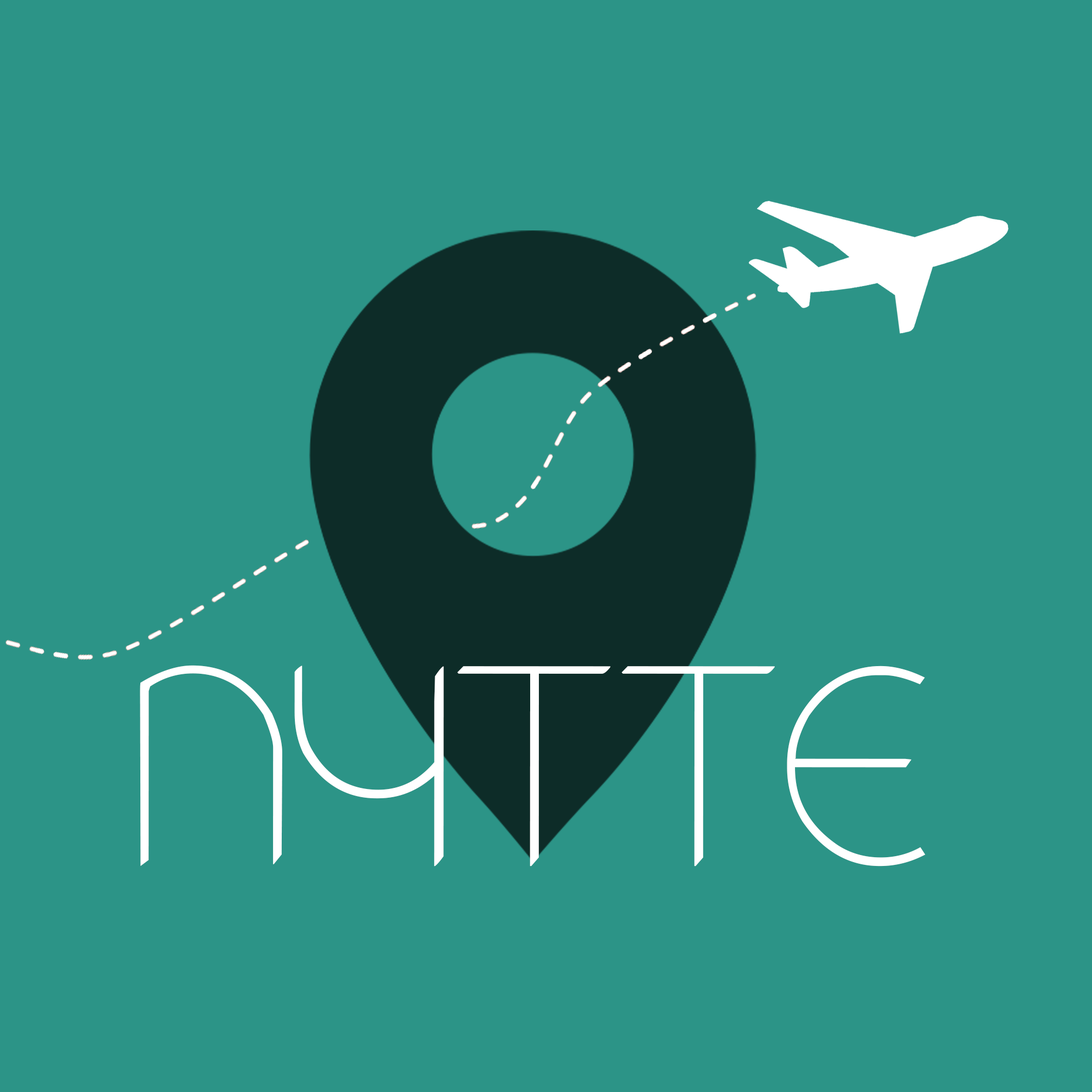
<style>
.page{position:relative;width:1092px;height:1092px;background:#2c9487}
.page>*{position:absolute;margin:0}
.t1{font:273px "Rounded,two.";color:#ffffff}
</style>
<div class="page">
<p class="t1" style="left:140px;top:665px;width:785px;height:201px">NYTTE</p>
</div>
